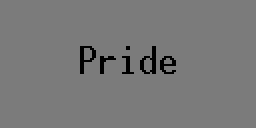
<style>
.page{position:relative;width:256px;height:128px;background:#7b7b7b}
.page>*{position:absolute;margin:0}
.t1{font:36px "Terminal";color:#000000}
</style>
<div class="page">
<p class="t1" style="left:80px;top:46px;width:96px;height:28px">Pride</p>
</div>
